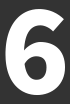
<style>
.page{position:relative;width:70px;height:104px;background:#333333}
.page>*{position:absolute;margin:0}
.t1{font:130.9px "SourceSansPro-Bold";letter-spacing:-0.05em;color:#ffffff}
</style>
<div class="page">
<p class="t1" style="left:5px;top:9px;width:60px;height:87px">6</p>
</div>
